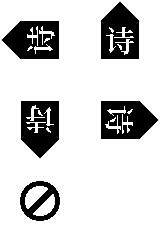
<style>
.page{position:relative;width:160px;height:240px;background:#ffffff}
.page>*{position:absolute;margin:0}
.t1{font:30px "SourceHanSerifCNVF-SemiBold";letter-spacing:0.1em;color:#ffffff}
</style>
<div class="page">
<p class="t1" style="left:27px;top:26px;width:28px;height:28px;rotate:-90deg">诗</p>
<p class="t1" style="left:106px;top:27px;width:28px;height:28px">诗</p>
<p class="t1" style="left:26px;top:105px;width:28px;height:28px;rotate:180deg">诗</p>
<p class="t1" style="left:105px;top:106px;width:28px;height:28px;rotate:90deg">诗</p>
</div>
